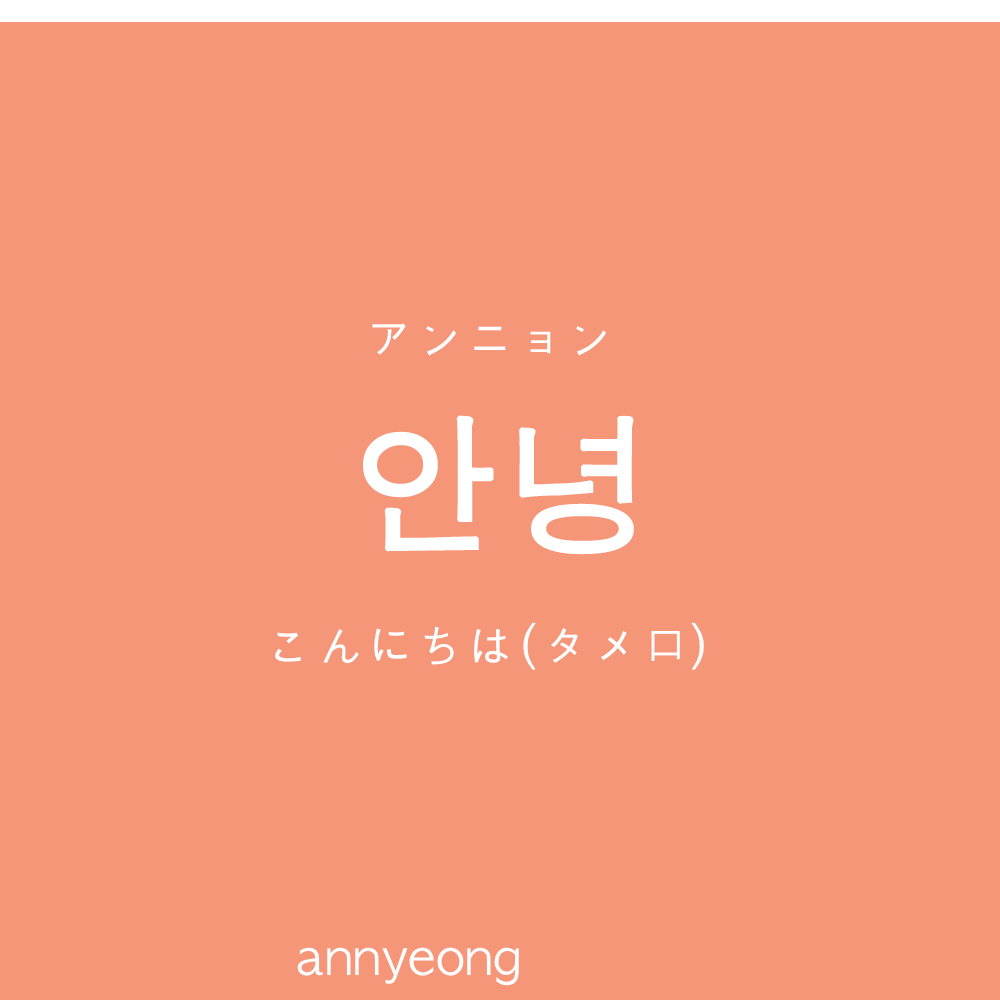
<style>
.page{position:relative;width:1000px;height:1000px;background:#f69679}
.page>*{position:absolute;margin:0}
.t1{font:50px "AppleGothic";color:#ffffff}
.t2{font:150px "AppleGothic";color:#ffffff;font-weight:bold}
</style>
<div class="page">
<p class="t1" style="left:372px;top:323px;width:234px;height:33px">アンニョン</p>
<p class="t2" style="left:363px;top:415px;width:271px;height:140px">안녕</p>
<p class="t1" style="left:275px;top:622px;width:429px;height:48px">こんにちは(タメ口）</p>
<p class="t1" style="left:297px;top:947px;width:222px;height:39px">annyeong</p>
</div>
